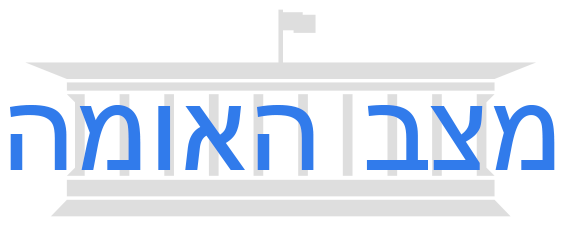
<style>
.page{position:relative;width:563px;height:226px;background:#ffffff}
.page>*{position:absolute;margin:0}
.t1{font:123px "ArialMT";color:#317beb}
</style>
<div class="page">
<p class="t1" style="left:10px;top:105px;width:545px;height:65px">מצב האומה</p>
</div>
